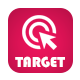
<style>
.page{position:relative;width:80px;height:80px;background:#ffffff}
.page>*{position:absolute;margin:0}
.t1{font:15px "Bauhaus93";color:#ffffff}
</style>
<div class="page">
<p class="t1" style="left:15px;top:56px;width:50px;height:12px">TARGET</p>
</div>
